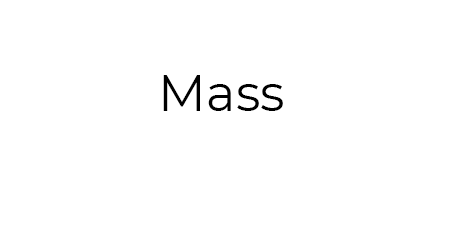
<style>
.page{position:relative;width:455px;height:238px;background:#ffffff}
.page>*{position:absolute;margin:0}
.t1{font:50px "Montserrat-Regular";color:#000000}
</style>
<div class="page">
<p class="t1" style="left:163px;top:75px;width:120px;height:36px">Mass</p>
</div>
